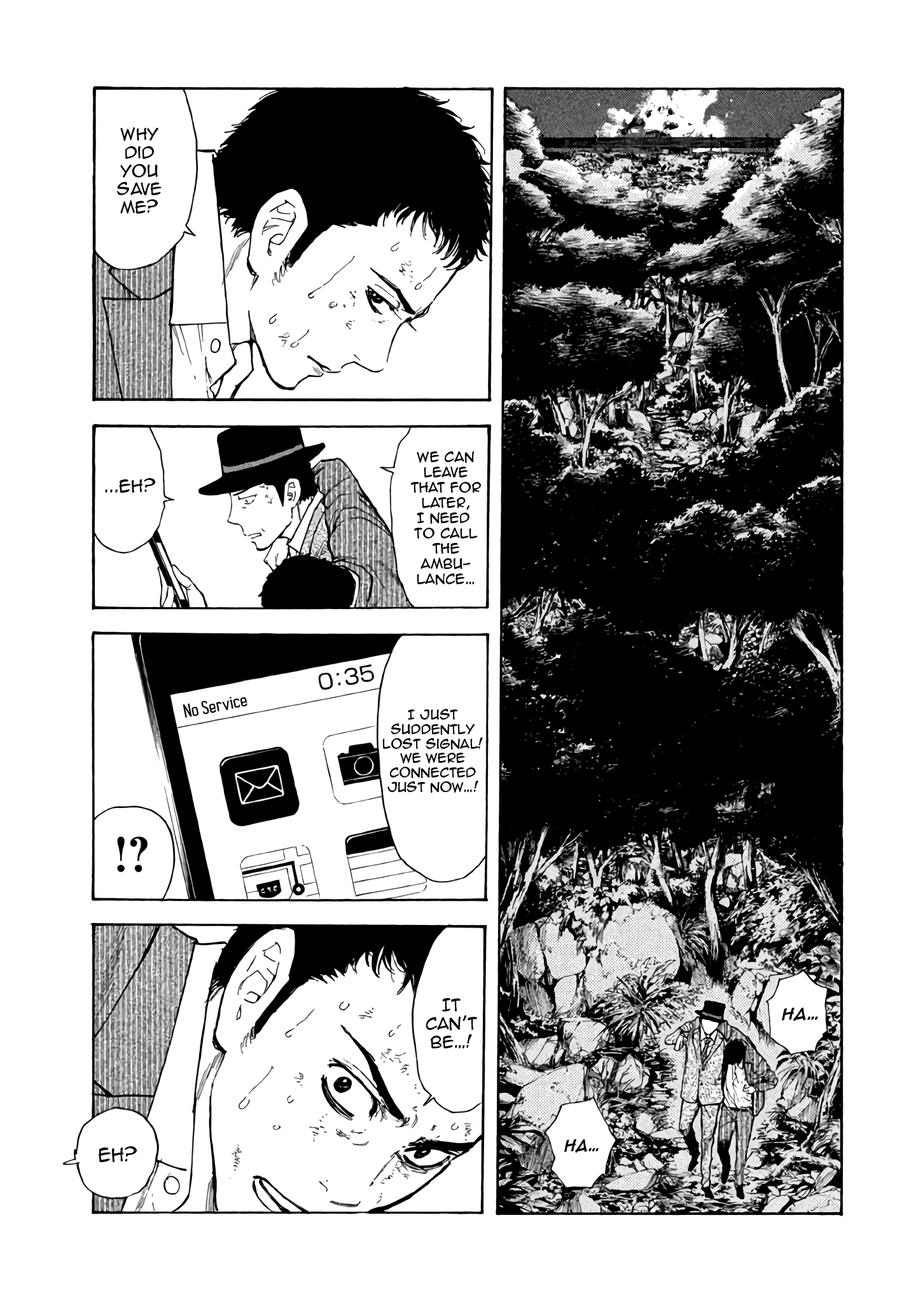
<style>
.page{position:relative;width:916px;height:1302px;background:#ffffff}
.page>*{position:absolute;margin:0}
.t1{font:15.3px "AnimeAce2.0BB";color:#000000}
.t2{font:12.7px "AnimeAce2.0BB";color:#000000}
.t3{font:15.9px "AnimeAce2.0BB";color:#000000}
.t4{font:17.2px "AutobusBold";color:#000000}
.t5{font:12.1px "AnimeAce2.0BB";color:#000000}
.t6{font:14px "AnimeAce2.0BB-Bold";color:#000000}
.t7{font:13.4px "AnimeAce2.0BB-Bold";color:#000000}
.t8{font:17.2px "AnimeAce2.0BB";color:#000000}
</style>
<div class="page">
<p class="t1" style="left:117px;top:127px;width:45px;height:87px;text-align:center">Why<br>Did<br>YOu<br>Save<br>me?</p>
<p class="t2" style="left:411px;top:451px;width:70px;height:134px;text-align:center">We can<br>leave<br>that for<br>later,<br>I need <br>to call<br>the<br>ambu-<br>lance…</p>
<p class="t3" style="left:105px;top:478px;width:50px;height:15px">...EH?</p>
<p class="t4" style="left:182px;top:697px;width:65px;height:21px;rotate:-11deg">No Service</p>
<p class="t5" style="left:382px;top:709px;width:101px;height:84px;text-align:center">I just<br>suddently<br>lost signal!<br>We were<br>connected<br>just now…!</p>
<p class="t1" style="left:425px;top:998px;width:52px;height:51px;text-align:center">It<br>can’t<br>be…!</p>
<p class="t6" style="left:781px;top:1008px;width:37px;height:13px">Ha…</p>
<p class="t7" style="left:564px;top:1139px;width:34px;height:14px">Ha…</p>
<p class="t8" style="left:99px;top:1146px;width:38px;height:16px">Eh?</p>
</div>
